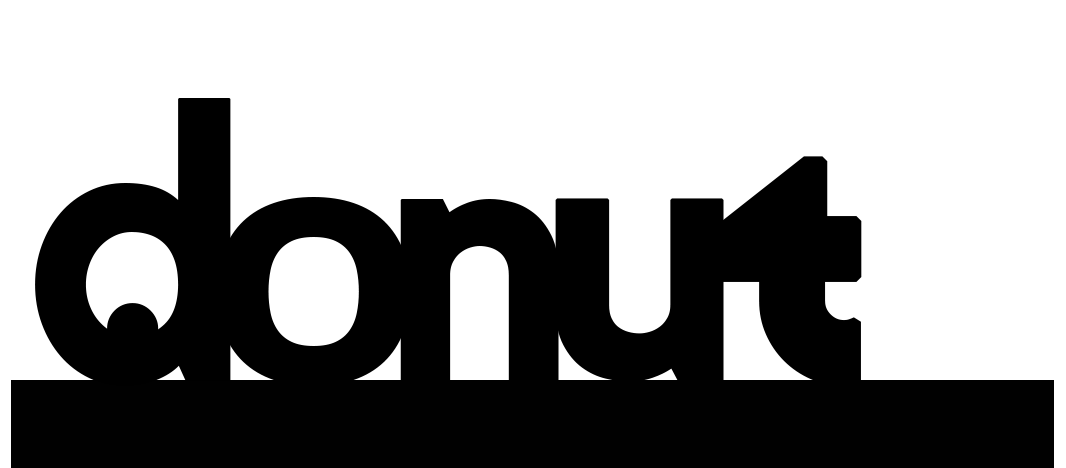
<style>
.page{position:relative;width:1066px;height:468px;background:#ffffff}
.page>*{position:absolute;margin:0}
.t1{font:384.8px "Kollektif-Bold";letter-spacing:-0.01em;color:#000000;font-weight:bold;scale:0.95 1}
.t2{font:362.2px "koliko-Bold";letter-spacing:-0.01em;color:#000000;font-weight:bold}
.t3{font:322.5px "HighlandGothicFLF";letter-spacing:-0.01em;color:#000000;font-weight:bold}
.t4{font:362.2px "Kollektif-Bold";letter-spacing:-0.01em;color:#000000;font-weight:bold}
.t5{font:362.2px "Kollektif-Bold";letter-spacing:-0.01em;color:#000000;font-weight:bold;scale:0.95 1}
.t6{font:362.2px "koliko-Regular";letter-spacing:-0.01em;color:#000000;font-weight:bold}
</style>
<div class="page">
<p class="t1" style="left:35px;top:98px;width:196px;height:288px">d</p>
<p class="t2" style="left:716px;top:156px;width:146px;height:230px">t</p>
<p class="t3" style="left:217px;top:197px;width:194px;height:189px">o</p>
<p class="t4" style="left:555px;top:198px;width:169px;height:184px">u</p>
<p class="t5" style="left:400px;top:199px;width:159px;height:182px">n</p>
<p class="t6" style="left:107px;top:303px;width:52px;height:51px">.</p>
</div>
